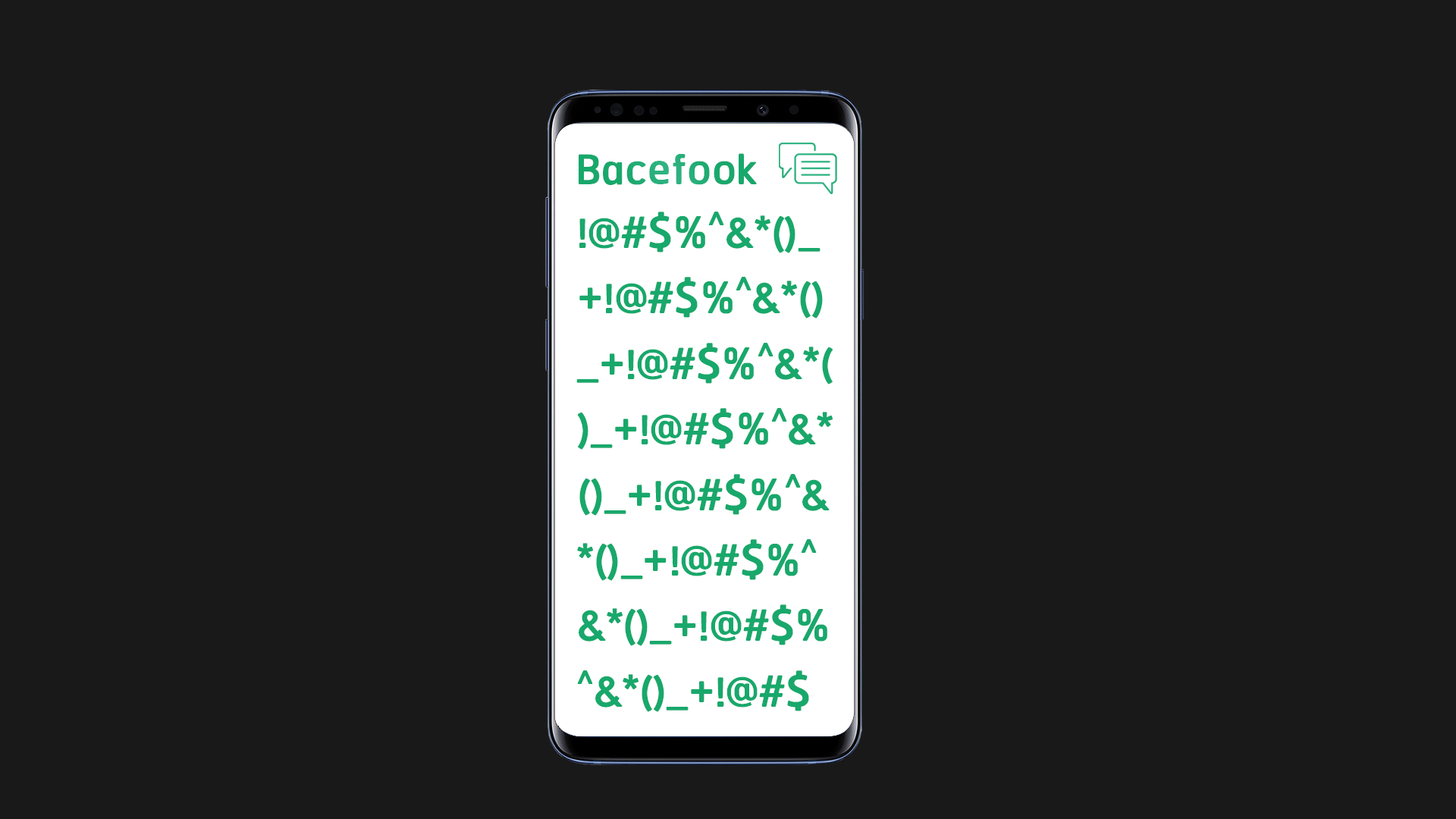
<style>
.page{position:relative;width:1456px;height:819px;background:#191919}
.page>*{position:absolute;margin:0}
.t1{font:54.6px "RSU-Bold";color:#19a86c}
.t2{font:54.6px "RSU-Bold";color:#18a86b}
</style>
<div class="page">
<p class="t1" style="left:579px;top:153px;width:178px;height:32px">Bacefook</p>
<p class="t2" style="left:576px;top:212px;width:257px;height:500px">!@#$%^&amp;*()_+!@#$%^&amp;*()_+!@#$%^&amp;*()_+!@#$%^&amp;*()_+!@#$%^&amp;*()_+!@#$%^&amp;*()_+!@#$%^&amp;*()_+!@#$%^&amp;*()_+</p>
</div>
